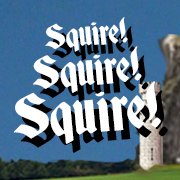
<style>
.page{position:relative;width:180px;height:180px}
.page>*{position:absolute;margin:0}
.t1{font:32.1px "Deutsch-Gothic";color:#ffffff}
.t2{font:42.6px "Deutsch-Gothic";color:#ffffff}
.t3{font:57.7px "Deutsch-Gothic";color:#ffffff}
</style>
<div class="page">
<p class="t1" style="left:45px;top:17px;width:83px;height:35px;rotate:-5deg">Squire!</p>
<p class="t2" style="left:33px;top:46px;width:109px;height:47px;rotate:-5deg">Squire!</p>
<p class="t3" style="left:14px;top:81px;width:147px;height:63px;rotate:-5deg">Squire!</p>
</div>
